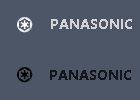
<style>
.page{position:relative;width:140px;height:100px;background:#4c5667}
.page>*{position:absolute;margin:0}
.t1{font:14px "SegoeUI-Bold";color:#d1d3d8}
.t2{font:14px "SegoeUI-Bold";color:#0a0b0e}
</style>
<div class="page">
<p class="t1" style="left:51px;top:19px;width:81px;height:10px">PANASONIC</p>
<p class="t2" style="left:50px;top:70px;width:81px;height:10px;opacity:0.74">PANASONIC</p>
</div>
